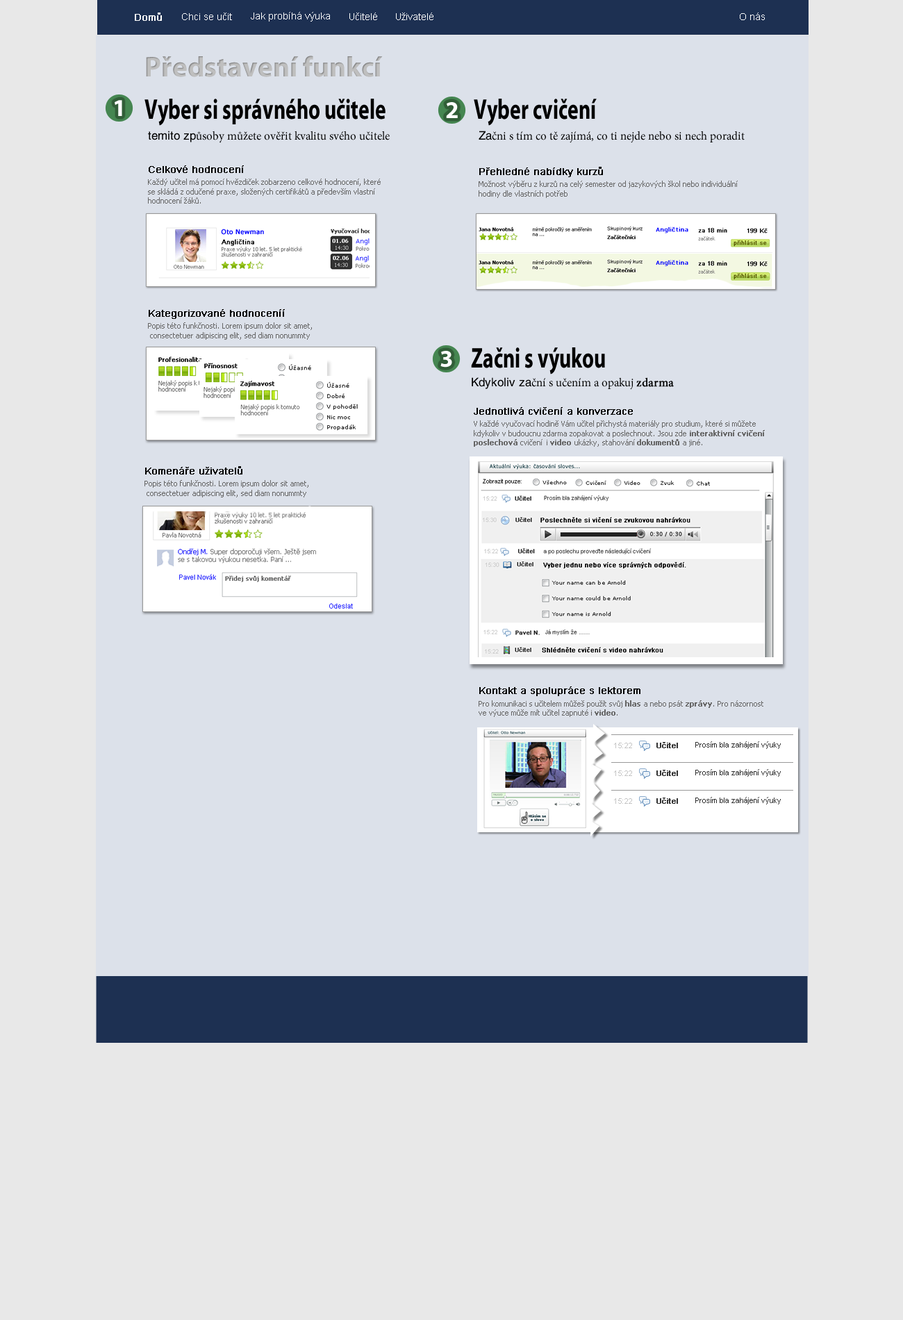
<style>
.page{position:relative;width:903px;height:1320px;background:#e8e8e8}
.page>*{position:absolute;margin:0}
.t1{font:9.7px "ArialMT";color:#ffffff;font-weight:bold}
.t2{font:9.7px "ArialMT";color:#ffffff}
.t3{font:28.5px "MyriadPro-Bold";color:#bfbfbf}
.t4{font:24.3px "MyriadPro-Bold";color:#ffffff}
.t5{font:28.5px "MyriadPro-Bold";color:#000000;scale:0.72 1}
.t6{font:11.8px "MinionPro-Regular";color:#000000}
.t7{font:11.8px "HelveticaLT";color:#000000}
.t8{font:9.7px "ArialMT";color:#000000;font-weight:bold}
.t9{font:7.6px/9.2px "Tahoma";color:#666666}
.t10{font:11.8px "MinionPro-Regular";color:#000000;font-weight:bold}
.t11{font:7.6px/9.2px "Tahoma";color:#666666;font-weight:bold}
</style>
<div class="page">
<p class="t1" style="left:135px;top:13px;width:27px;height:8px">Domů</p>
<p class="t2" style="left:182px;top:13px;width:50px;height:7px">Chci se učit</p>
<p class="t2" style="left:251px;top:12px;width:79px;height:10px">Jak probíhá výuka</p>
<p class="t2" style="left:349px;top:13px;width:28px;height:7px">Učitelé</p>
<p class="t2" style="left:396px;top:13px;width:38px;height:7px">Uživatelé</p>
<p class="t2" style="left:740px;top:13px;width:25px;height:7px">O nás</p>
<p class="t3" style="left:146px;top:56px;width:237px;height:21px">Představení funkcí</p>
<p class="t4" style="left:115px;top:100px;width:7px;height:16px">1</p>
<p class="t5" style="left:145px;top:99px;width:241px;height:27px">Vyber si správného učitele</p>
<p class="t5" style="left:474px;top:99px;width:123px;height:27px">Vyber cvičení</p>
<p class="t4" style="left:446px;top:102px;width:12px;height:16px">2</p>
<p class="t6" style="left:148px;top:131px;width:242px;height:12px"><span class="t7">temito zp</span>ůsoby můžete ověřit kvalitu svého učitele</p>
<p class="t6" style="left:479px;top:131px;width:266px;height:12px"><span class="t7">Za</span>čni s tím co tě zajímá, co ti nejde nebo si nech poradit</p>
<p class="t8" style="left:149px;top:165px;width:95px;height:8px">Celkové hodnocení</p>
<p class="t8" style="left:479px;top:167px;width:124px;height:10px">Přehledné nabídky kurzů</p>
<p class="t9" style="left:148px;top:179px;width:233px;height:25px">Každý učitel má pomocí hvězdiček zobarzeno celkové hodnocení, které<br>se skládá z odučené praxe, složených certifikátů a především vlastní <br>hodnocení žáků.</p>
<p class="t9" style="left:479px;top:181px;width:259px;height:17px">Možnost výběru z kurzů na celý semester od jazykových škol nebo individuální hodiny dle vlastních potřeb</p>
<p class="t8" style="left:149px;top:309px;width:136px;height:10px">Kategorizované hodnoceníí</p>
<p class="t9" style="left:148px;top:322px;width:164px;height:18px">Popis této funkčnosti. Lorem ipsum dolor sit amet,<br> consectetuer adipiscing elit, sed diam nonummty</p>
<p class="t4" style="left:441px;top:351px;width:11px;height:17px">3</p>
<p class="t5" style="left:471px;top:347px;width:134px;height:28px">Začni s výukou</p>
<p class="t6" style="left:472px;top:377px;width:202px;height:13px"><span class="t7">Kdykoliv za</span>ční s učením a opakuj <span class="t10">zdarma</span></p>
<p class="t8" style="left:474px;top:407px;width:159px;height:8px">Jednotlivá cvičení a konverzace</p>
<p class="t9" style="left:474px;top:420px;width:291px;height:27px">V každé vyučovací hodině Vám učitel přichystá materiály pro studium, které si můžete kdykoliv v budoucnu zdarma zopakovat a poslechnout. Jsou zde<span class="t11"> interaktivní cvičení poslechová</span> cvičení  i <span class="t11">video </span>ukázky, stahování <span class="t11">dokumentů </span>a jiné.</p>
<p class="t8" style="left:145px;top:466px;width:97px;height:9px">Komenáře uživatelů</p>
<p class="t9" style="left:145px;top:480px;width:163px;height:17px">Popis této funkčnosti. Lorem ipsum dolor sit amet,<br> consectetuer adipiscing elit, sed diam nonummty</p>
<p class="t8" style="left:479px;top:686px;width:162px;height:10px">Kontakt a spolupráce s lektorem</p>
<p class="t9" style="left:479px;top:700px;width:285px;height:17px">Pro komunikaci s učitelem můžeš použít svůj <span class="t11">hlas </span>a nebo psát <span class="t11">zprávy</span>. Pro názornost ve výuce může mít učitel zapnuté i <span class="t11">video</span>.</p>
</div>
